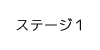
<style>
.page{position:relative;width:100px;height:50px;background:#ffffff}
.page>*{position:absolute;margin:0}
.t1{font:14px "mplus-2p-thin";font-weight:bold}
</style>
<div class="page">
<p class="t1" style="left:16px;top:18px;width:65px;height:13px">ステージ１</p>
</div>
